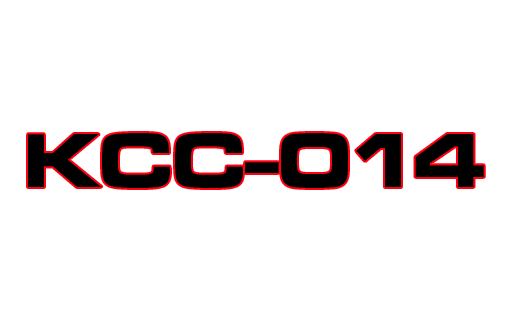
<style>
.page{position:relative;width:512px;height:320px;background:#ffffff}
.page>*{position:absolute;margin:0}
.t1{font:80px "MicrogrammaD-BoldExte";color:#000000}
</style>
<div class="page">
<p class="t1" style="left:28px;top:133px;width:456px;height:55px">KCC-014</p>
</div>
